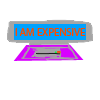
<style>
.page{position:relative;width:100px;height:100px;background:#ffffff}
.page>*{position:absolute;margin:0}
.t1{font:10.7px "MyriadPro-Regular";color:#fb4d00}
</style>
<div class="page">
<p class="t1" style="left:15px;top:28px;width:71px;height:8px">I AM EXPENSIVE</p>
</div>
